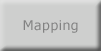
<style>
.page{position:relative;width:101px;height:51px;background:#cecfce}
.page>*{position:absolute;margin:0}
.t1{font:13.3px "Verdana";color:#828282}
</style>
<div class="page">
<p class="t1" style="left:23px;top:20px;width:55px;height:13px">Mapping</p>
</div>
